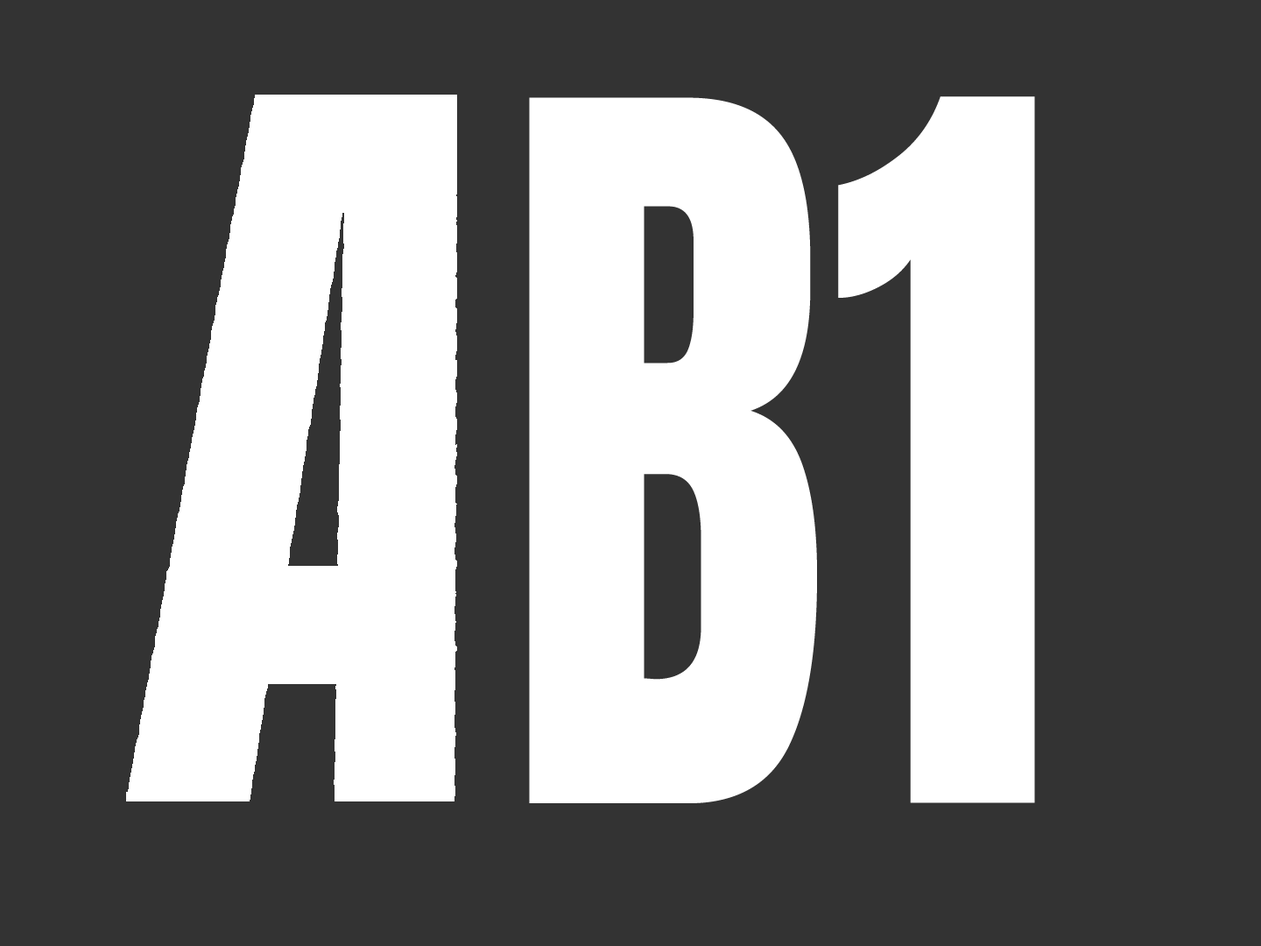
<style>
.page{position:relative;width:1261px;height:946px;background:#333333}
.page>*{position:absolute;margin:0}
.t1{font:820.9px "Anton-Regular";color:#ffffff;scale:0.83 1}
</style>
<div class="page">
<p class="t1" style="left:529px;top:96px;width:506px;height:707px">B1</p>
</div>
